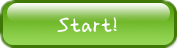
<style>
.page{position:relative;width:177px;height:48px}
.page>*{position:absolute;margin:0}
.t1{font:20px "AaJoe";color:#ffffff}
</style>
<div class="page">
<p class="t1" style="left:57px;top:17px;width:60px;height:15px">Start!</p>
</div>
